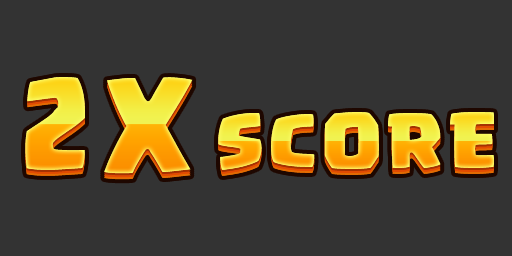
<style>
.page{position:relative;width:512px;height:256px;background:#333333}
.page>*{position:absolute;margin:0}
.t1{font:97.3px "Supercell-Magic";letter-spacing:0.06em}
.t2{font:58.4px "Supercell-Magic";letter-spacing:0.06em}
</style>
<div class="page">
<p class="t1" style="left:25px;top:77px;width:168px;height:97px">2X</p>
<p class="t2" style="left:218px;top:112px;width:276px;height:58px">SCORE</p>
</div>
